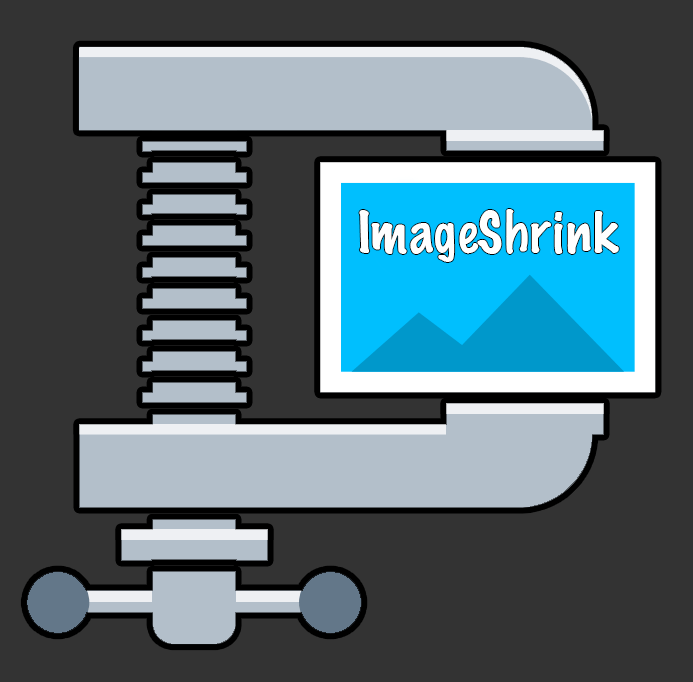
<style>
.page{position:relative;width:693px;height:682px;background:#333333}
.page>*{position:absolute;margin:0}
.t1{font:51.6px "MarkerFelt-Thin";color:#ffffff}
</style>
<div class="page">
<p class="t1" style="left:359px;top:209px;width:260px;height:53px">ImageShrink</p>
</div>
